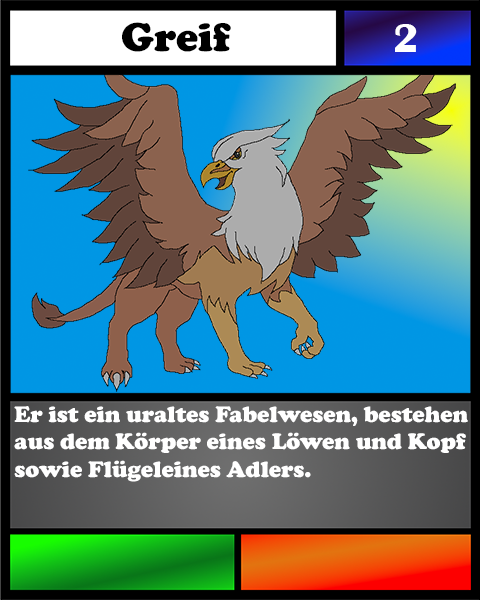
<style>
.page{position:relative;width:480px;height:600px}
.page>*{position:absolute;margin:0}
.t1{font:41.7px "CooperBlack";color:#000000}
.t2{font:41.7px "BritannicBold";color:#ffffff}
.t3{font:23.1px "CooperBlack";color:#ffffff}
</style>
<div class="page">
<p class="t1" style="left:122px;top:22px;width:109px;height:30px">Greif</p>
<p class="t2" style="left:395px;top:24px;width:22px;height:28px">2</p>
<p class="t3" style="left:14px;top:406px;width:454px;height:76px">Er ist ein uraltes Fabelwesen, bestehen aus dem Körper eines Löwen und Kopf sowie Flügeleines Adlers.</p>
</div>
